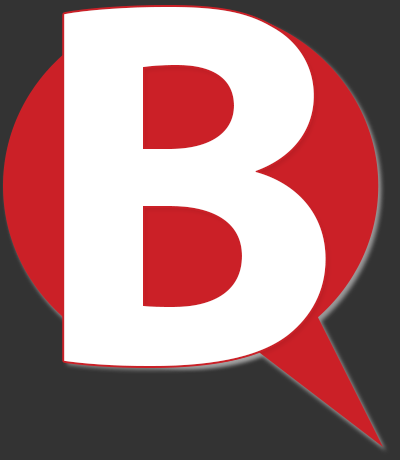
<style>
.page{position:relative;width:400px;height:460px;background:#ffffff}
.page>*{position:absolute;margin:0}
.t1{font:522px "MyriadPro-Bold";color:#ffffff}
</style>
<div class="page">
<p class="t1" style="left:64px;top:7px;width:262px;height:359px">B</p>
</div>
